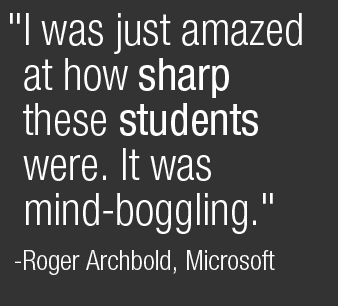
<style>
.page{position:relative;width:338px;height:306px;background:#333333}
.page>*{position:absolute;margin:0}
.t1{font:44.4px/45px "HelveticaNeue-LightCond";color:#ffffff}
.t2{font:44.4px/45px "HelveticaNeue-Condensed";color:#ffffff}
.t3{font:27.4px/45px "HelveticaNeue-LightCond";color:#ffffff}
</style>
<div class="page">
<p class="t1" style="left:10px;top:13px;width:292px;height:262px">"I was just amazed at how <span class="t2">sharp </span>these <span class="t2">students </span>were. It was mind-boggling." <span class="t3">-Roger Archbold, Microsoft</span></p>
</div>
